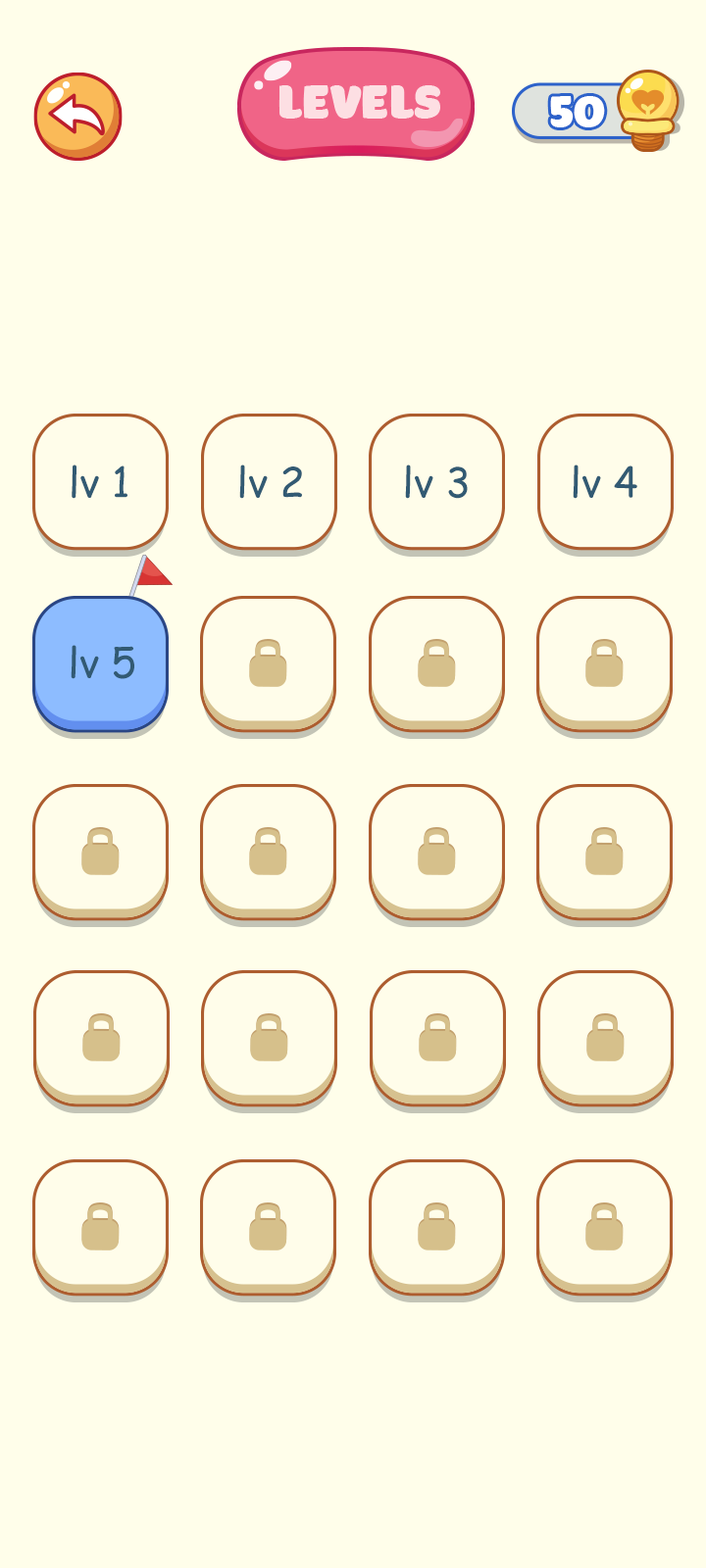
<style>
.page{position:relative;width:706px;height:1568px;background:#fffeea}
.page>*{position:absolute;margin:0}
.t1{font:40.8px "ComicSansMS";color:#325a73}
</style>
<div class="page">
<p class="t1" style="left:72px;top:465px;width:55px;height:34px">lv 1</p>
<p class="t1" style="left:239px;top:465px;width:63px;height:34px">lv 2</p>
<p class="t1" style="left:405px;top:465px;width:62px;height:34px">lv 3</p>
<p class="t1" style="left:572px;top:465px;width:65px;height:34px">lv 4</p>
<p class="t1" style="left:71px;top:645px;width:63px;height:34px">lv 5</p>
</div>
